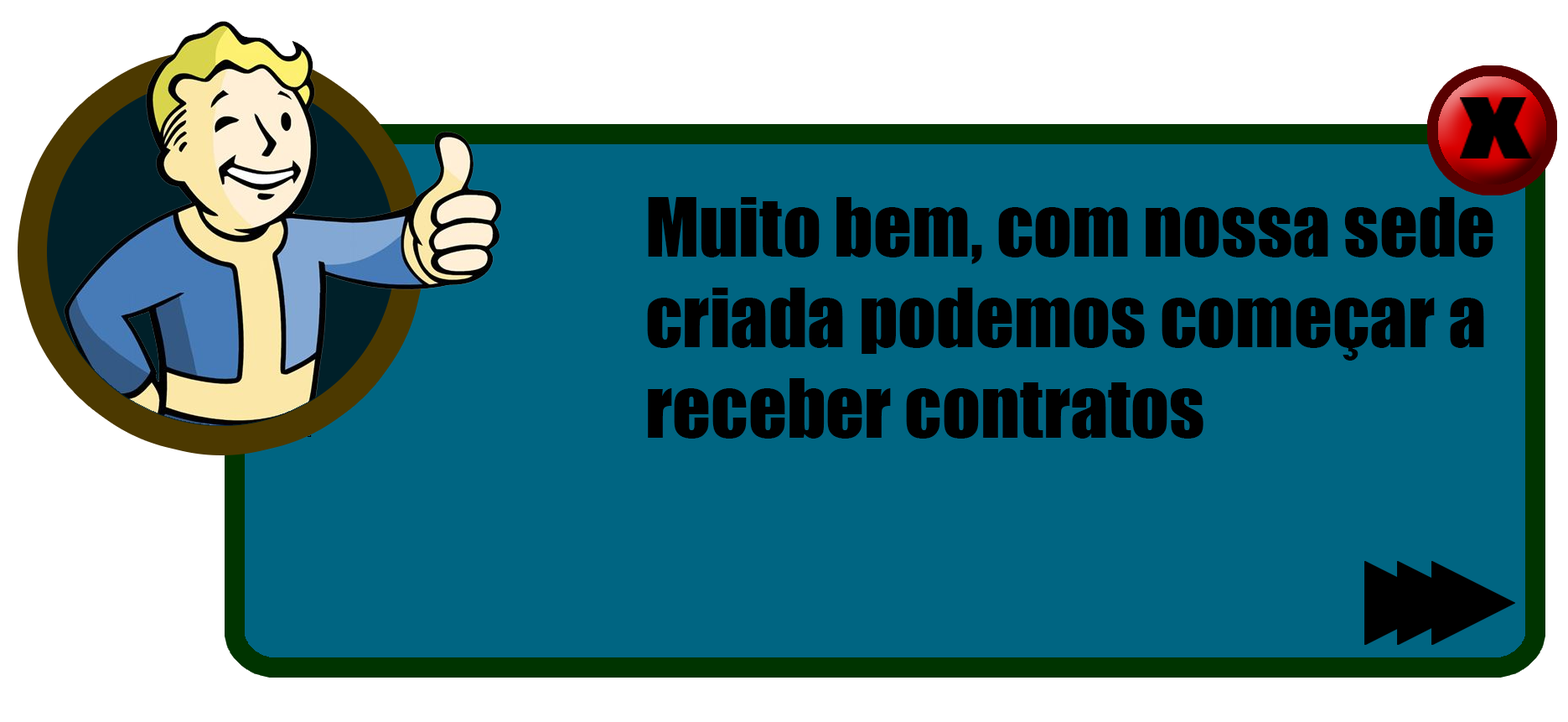
<style>
.page{position:relative;width:1568px;height:722px;background:#006582}
.page>*{position:absolute;margin:0}
.t1{font:75.4px "Impact";color:#000000}
</style>
<div class="page">
<p class="t1" style="left:647px;top:197px;width:846px;height:241px">Muito bem, com nossa sede<br>criada podemos começar a<br>receber contratos</p>
</div>
